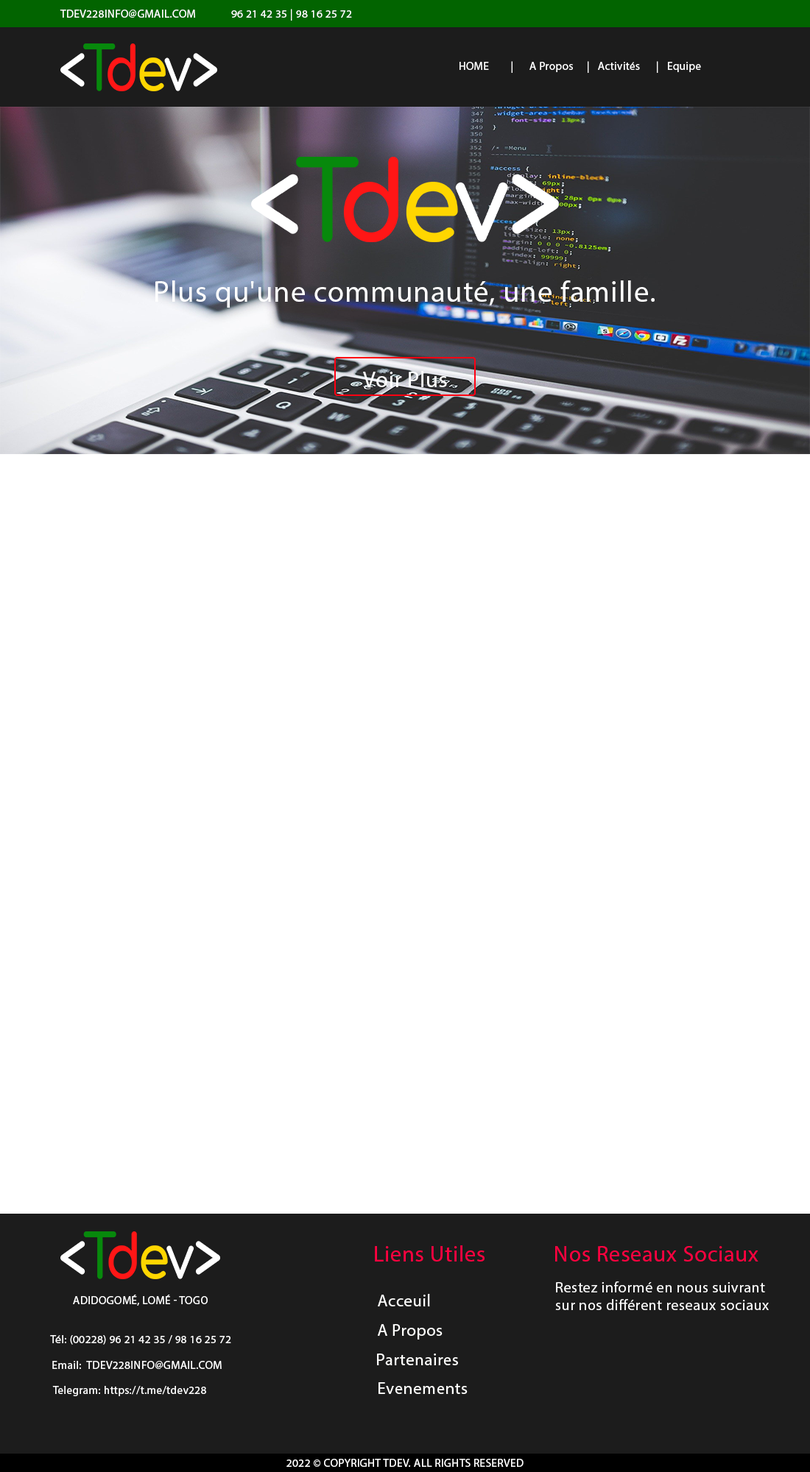
<style>
.page{position:relative;width:810px;height:1472px;background:#ffffff}
.page>*{position:absolute;margin:0}
.t1{font:11.2px "MyriadPro-Regular";letter-spacing:0.025em;color:#ffffff;text-transform:uppercase}
.t2{font:11.2px "MyriadPro-Regular";letter-spacing:0.025em;color:#ffffff}
.t3{font:29.9px "MyriadPro-Regular";letter-spacing:0.025em;color:#ffffff}
.t4{font:22.4px "MyriadPro-Regular";letter-spacing:0.025em;color:#ffffff}
.t5{font:22.4px "MyriadPro-Regular";letter-spacing:0.025em;color:#ff0040}
.t6{font:15px "MyriadPro-Regular";letter-spacing:0.025em;color:#fefefe}
.t7{font:16.8px "MyriadPro-Regular";letter-spacing:0.025em;color:#fffffd}
</style>
<div class="page">
<p class="t1" style="left:60px;top:10px;width:135px;height:8px">tdev228info@gmail.com</p>
<p class="t1" style="left:231px;top:9px;width:121px;height:12px">96 21 42 35 | 98 16 25 72</p>
<p class="t2" style="left:459px;top:61px;width:242px;height:12px"><span class="t1">Home        |      A </span>Propos     |   Activités      |   Equipe</p>
<p class="t3" style="left:155px;top:280px;width:499px;height:28px">Plus qu'une communauté, une famille.</p>
<p class="t4" style="left:363px;top:371px;width:84px;height:16px">Voir Plus</p>
<p class="t5" style="left:375px;top:1246px;width:109px;height:16px">Liens Utiles</p>
<p class="t5" style="left:555px;top:1246px;width:203px;height:16px">Nos Reseaux Sociaux</p>
<p class="t6" style="left:555px;top:1282px;width:214px;height:28px">Restez informé en nous suivrant<br>sur nos différent reseaux sociaux</p>
<p class="t1" style="left:73px;top:1295px;width:135px;height:11px">Adidogomé, Lomé - Togo</p>
<p class="t7" style="left:378px;top:1294px;width:52px;height:13px">Acceuil</p>
<p class="t7" style="left:378px;top:1324px;width:64px;height:16px">A Propos</p>
<p class="t1" style="left:50px;top:1335px;width:181px;height:10px"><span class="t2">Tél</span>: (00228) 96 21 42 35 / 98 16 25 72</p>
<p class="t1" style="left:52px;top:1361px;width:170px;height:8px"><span class="t2">Email</span>:  tdev228info@gmail.com</p>
<p class="t7" style="left:377px;top:1354px;width:81px;height:12px">Partenaires</p>
<p class="t7" style="left:378px;top:1383px;width:89px;height:11px">Evenements</p>
<p class="t2" style="left:52px;top:1386px;width:154px;height:11px">Telegram: https://t.me/tdev228</p>
<p class="t1" style="left:286px;top:1459px;width:237px;height:8px">2022 © Copyright TDEV. All Rights Reserved</p>
</div>
